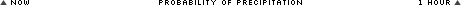
<style>
.page{position:relative;width:461px;height:5px;background:#ffffff}
.page>*{position:absolute;margin:0}
.t1{font:8px "Silkscreen";color:#000000}
</style>
<div class="page">
<p class="t1" style="left:11px;top:0px;width:18px;height:5px">NOW</p>
<p class="t1" style="left:159px;top:0px;width:143px;height:5px">probability of precipitation</p>
<p class="t1" style="left:419px;top:0px;width:31px;height:5px">1 HOUR</p>
</div>
